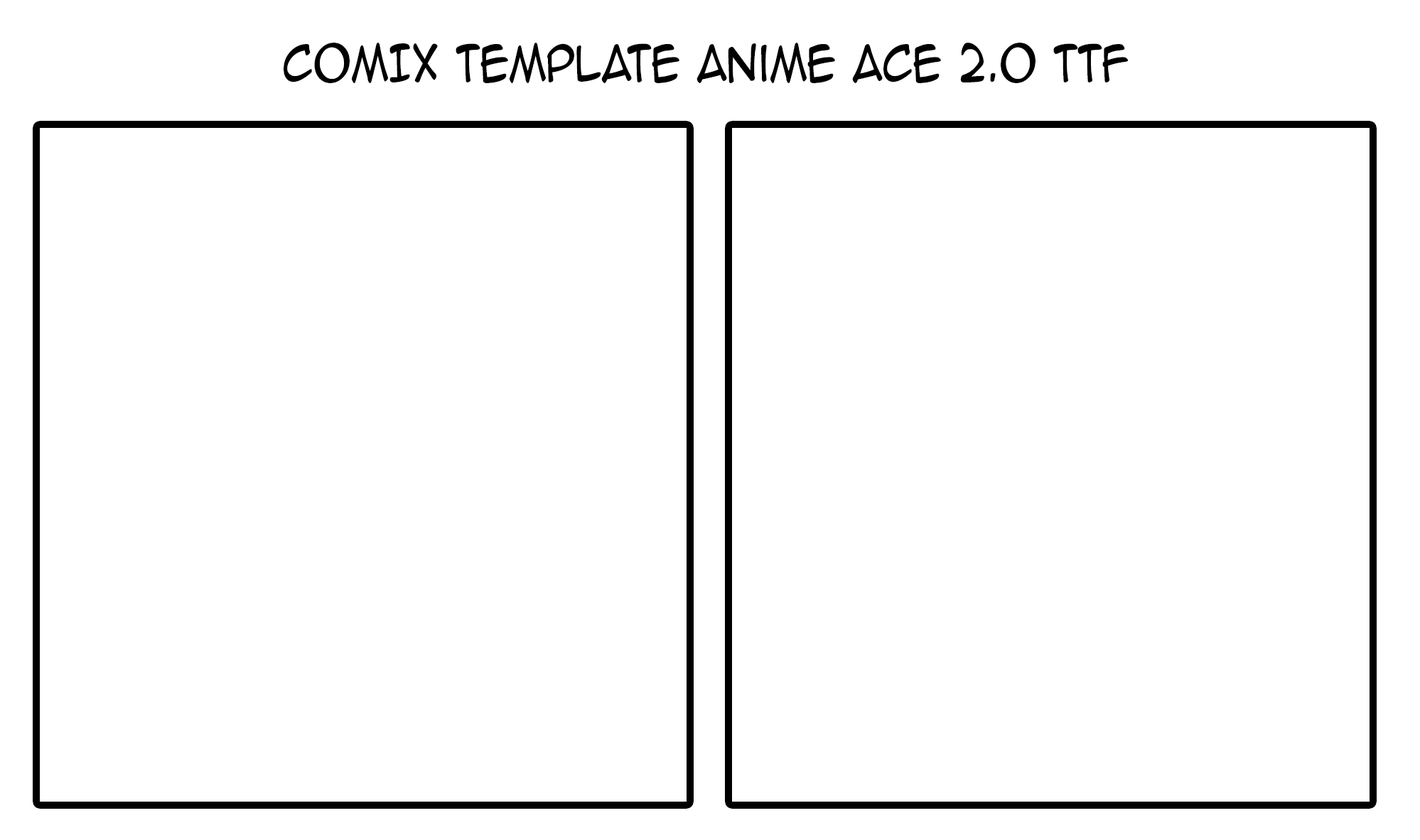
<style>
.page{position:relative;width:1420px;height:840px;background:#ffffff}
.page>*{position:absolute;margin:0}
.t1{font:10.9px "AnimeAce2.0BB";color:#000000;scale:0.85 1}
</style>
<div class="page">
<p class="t1" style="left:284px;top:43px;width:844px;height:40px">cOMIx TeMPLATE Anime acE 2.0 ttf</p>
</div>
